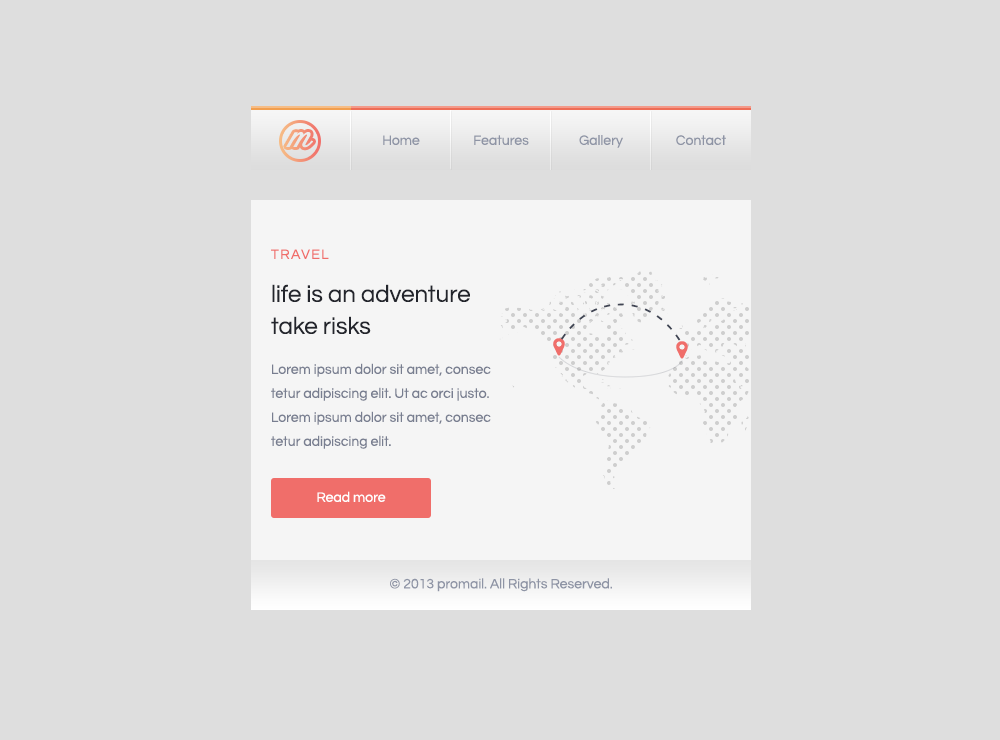
<style>
.page{position:relative;width:1000px;height:740px;background:#dedede}
.page>*{position:absolute;margin:0}
.t1{font:14px "Questrial-Regular";color:#8e94a5}
.t2{font:14px "Questrial-Regular";letter-spacing:0.1em;color:#f06e6a;text-transform:uppercase}
.t3{font:24px/32px "Questrial-Regular";color:#23252c}
.t4{font:24px "MyriadPro-Regular";color:#414655}
.t5{font:14px/24px "Questrial-Regular";color:#787e90}
.t6{font:14px "Questrial-Regular";color:#ffffff}
</style>
<div class="page">
<p class="t1" style="left:383px;top:135px;width:37px;height:10px">Home</p>
<p class="t1" style="left:474px;top:135px;width:55px;height:10px">Features</p>
<p class="t1" style="left:579px;top:135px;width:44px;height:13px">Gallery</p>
<p class="t1" style="left:676px;top:135px;width:50px;height:10px">Contact</p>
<p class="t2" style="left:271px;top:249px;width:58px;height:10px">travel</p>
<p class="t3" style="left:271px;top:284px;width:199px;height:50px">life is an adventure take risks</p>
<p class="t4" style="left:561px;top:303px;width:120px;height:38px">- - - - - - - - - - -</p>
<p class="t5" style="left:271px;top:363px;width:220px;height:86px">Lorem ipsum dolor sit amet, consec tetur adipiscing elit. Ut ac orci justo. Lorem ipsum dolor sit amet, consec tetur adipiscing elit.</p>
<p class="t6" style="left:317px;top:491px;width:69px;height:11px">Read more</p>
<p class="t1" style="left:390px;top:578px;width:222px;height:14px">© 2013 promail. All Rights Reserved.</p>
</div>
